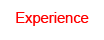
<style>
.page{position:relative;width:104px;height:40px;background:#ffffff}
.page>*{position:absolute;margin:0}
.t1{font:14.7px "ArialMT";color:#ff0000}
</style>
<div class="page">
<p class="t1" style="left:16px;top:12px;width:73px;height:14px">Experience</p>
</div>
